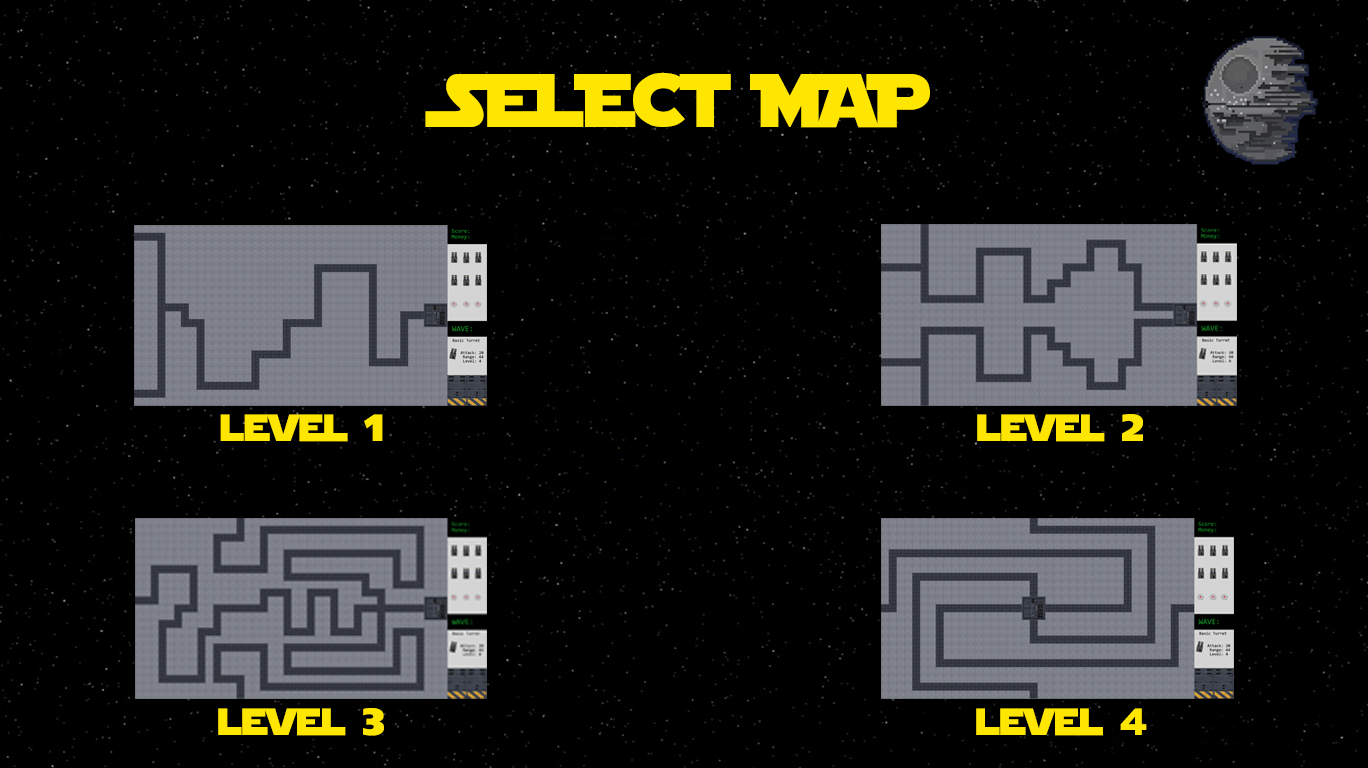
<style>
.page{position:relative;width:1368px;height:768px;background:#000000}
.page>*{position:absolute;margin:0}
.t1{font:75px "StarJedi";color:#ffe600}
.t2{font:37.5px "StarJedi";color:#ffe600}
</style>
<div class="page">
<p class="t1" style="left:425px;top:72px;width:505px;height:56px">S;LECT MAP</p>
<p class="t2" style="left:220px;top:414px;width:163px;height:28px">level 1</p>
<p class="t2" style="left:977px;top:414px;width:166px;height:28px">level 2</p>
<p class="t2" style="left:218px;top:708px;width:166px;height:28px">level 3</p>
<p class="t2" style="left:976px;top:708px;width:171px;height:28px">level 4</p>
</div>
